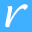
<style>
.page{position:relative;width:32px;height:32px;background:#3eb0ff}
.page>*{position:absolute;margin:0}
.t1{font:42px "LucidaHandwriting-Italic";color:#ffffff}
</style>
<div class="page">
<p class="t1" style="left:5px;top:4px;width:23px;height:24px">r</p>
</div>
